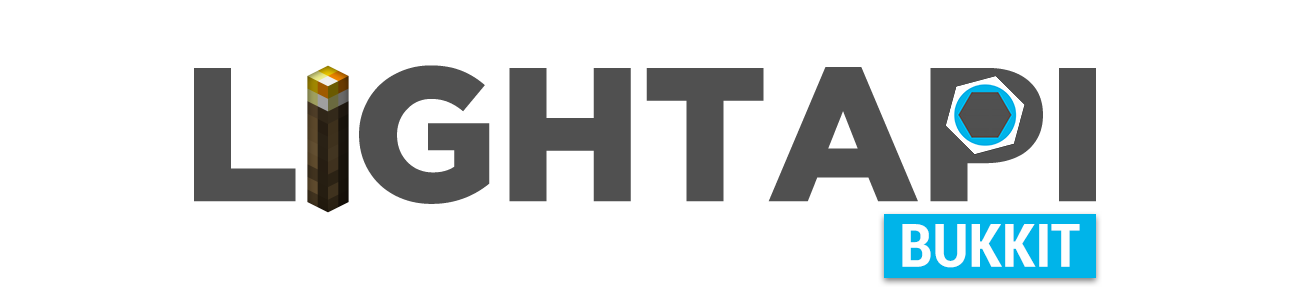
<style>
.page{position:relative;width:1300px;height:300px;background:#ffffff}
.page>*{position:absolute;margin:0}
.t1{font:190px "GothamPro-Black";color:#505050}
.t2{font:60px "Roboto-BoldCondensed";color:#ffffff}
</style>
<div class="page">
<p class="t1" style="left:194px;top:65px;width:902px;height:139px">L GHTAPI</p>
<p class="t2" style="left:902px;top:224px;width:178px;height:44px">BUKKIT</p>
</div>
